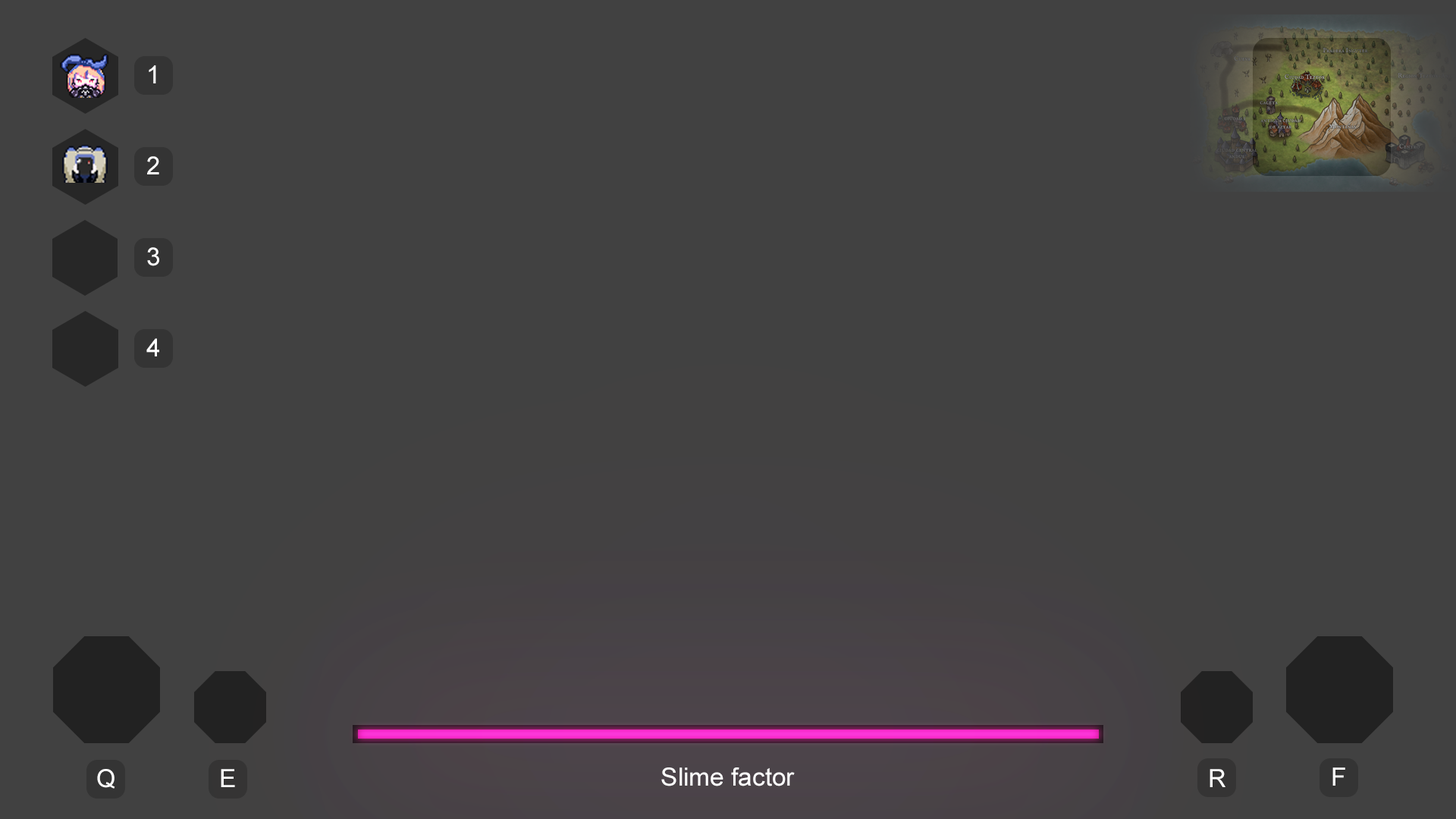
<style>
.page{position:relative;width:1456px;height:819px;background:#414141}
.page>*{position:absolute;margin:0}
.t1{font:25.3px "ArialMT";color:#ffffff}
.t2{font:25.2px "ArialMT";color:#ffffff}
</style>
<div class="page">
<p class="t1" style="left:149px;top:65px;width:7px;height:18px">1</p>
<p class="t2" style="left:147px;top:156px;width:12px;height:18px">2</p>
<p class="t1" style="left:147px;top:247px;width:12px;height:19px">3</p>
<p class="t2" style="left:146px;top:338px;width:13px;height:18px">4</p>
<p class="t2" style="left:97px;top:769px;width:18px;height:20px">Q</p>
<p class="t2" style="left:221px;top:769px;width:14px;height:18px">E</p>
<p class="t1" style="left:661px;top:767px;width:134px;height:19px">Slime factor</p>
<p class="t2" style="left:1210px;top:769px;width:15px;height:18px">R</p>
<p class="t2" style="left:1332px;top:767px;width:13px;height:19px">F</p>
</div>
